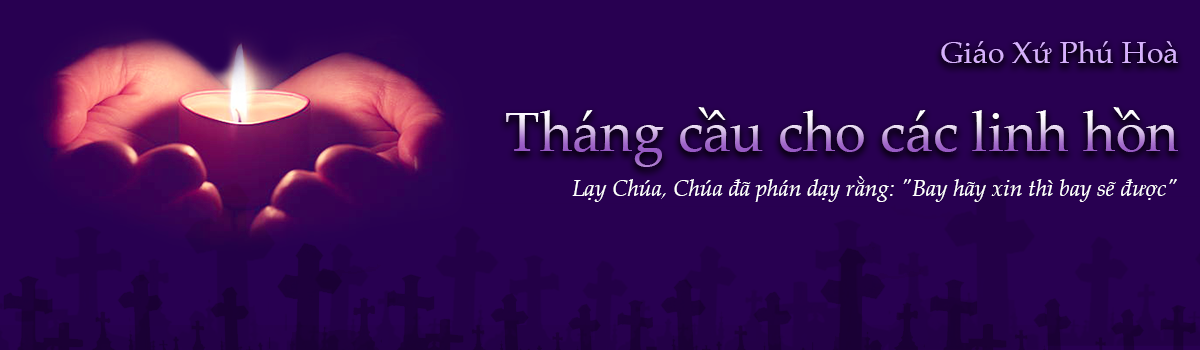
<style>
.page{position:relative;width:1200px;height:350px;background:#280051}
.page>*{position:absolute;margin:0}
.t1{font:30.5px "PalatinoLinotype-Roman";color:#d6b0fd}
.t2{font:55.9px "PalatinoLinotype-Roman"}
.t3{font:22.9px "PalatinoLinotype-Italic";color:#ffffff}
</style>
<div class="page">
<p class="t1" style="left:941px;top:41px;width:237px;height:22px">Giáo Xứ Phú Hoà</p>
<p class="t2" style="left:506px;top:107px;width:672px;height:60px">Tháng cầu cho các linh hồn</p>
<p class="t3" style="left:572px;top:176px;width:605px;height:26px">Lạy Chúa, Chúa đã phán dạy rằng: "Bay hãy xin thì bay sẽ được"</p>
</div>
